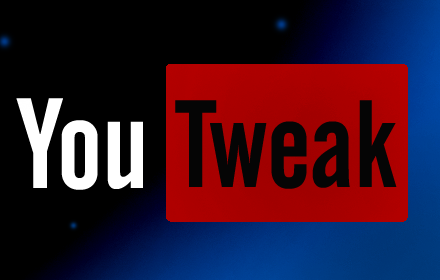
<style>
.page{position:relative;width:440px;height:280px;background:#000000}
.page>*{position:absolute;margin:0}
.t1{font:127px "AlternateGothicNo2BT-Regular";color:#ffffff}
.t2{font:122.7px "AlternateGothicNo2BT-Regular";color:#050505}
</style>
<div class="page">
<p class="t1" style="left:16px;top:98px;width:127px;height:92px">You</p>
<p class="t2" style="left:175px;top:100px;width:222px;height:89px">Tweak</p>
</div>
